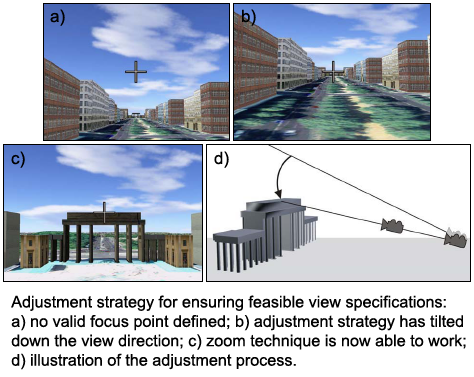
<style>
.page{position:relative;width:474px;height:377px;background:#ffffff}
.page>*{position:absolute;margin:0}
.t1{font:17px "ArialMT";color:#000000}
.t2{font:16.2px "ArialMT";color:#000000}
</style>
<div class="page">
<p class="t1" style="left:50px;top:9px;width:15px;height:17px">a)</p>
<p class="t1" style="left:242px;top:9px;width:14px;height:17px">b)</p>
<p class="t1" style="left:11px;top:151px;width:14px;height:17px">c)</p>
<p class="t1" style="left:214px;top:151px;width:15px;height:17px">d)</p>
<p class="t2" style="left:11px;top:295px;width:455px;height:75px">Adjustment strategy for ensuring feasible view specifications:<br>a) no valid focus point defined; b) adjustment strategy has tilted<br>down the view direction; c) zoom technique is now able to work;<br>d) illustration of the adjustment process.</p>
</div>
